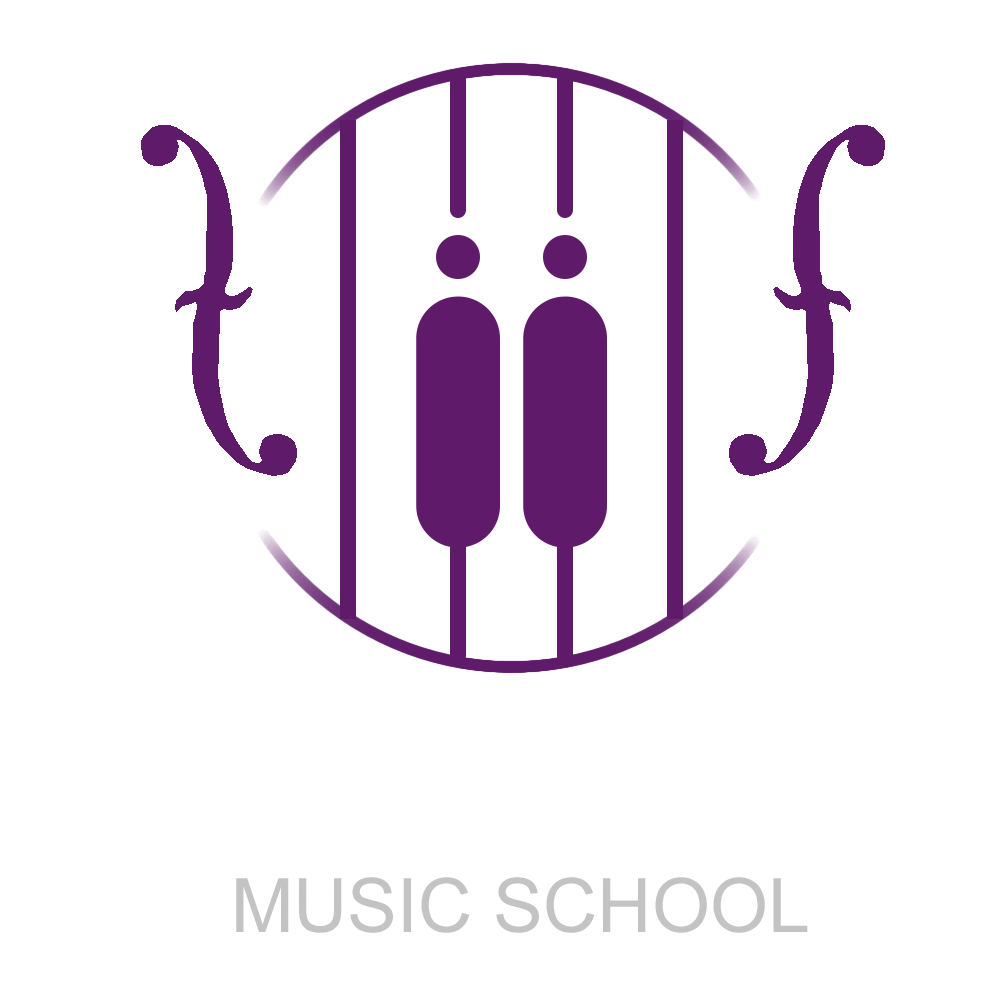
<style>
.page{position:relative;width:1000px;height:1000px;background:#ffffff}
.page>*{position:absolute;margin:0}
.t1{font:75px "ArialMT";color:#c3c3c3}
</style>
<div class="page">
<p class="t1" style="left:236px;top:877px;width:572px;height:56px">MUSIC SCHOOL</p>
</div>
